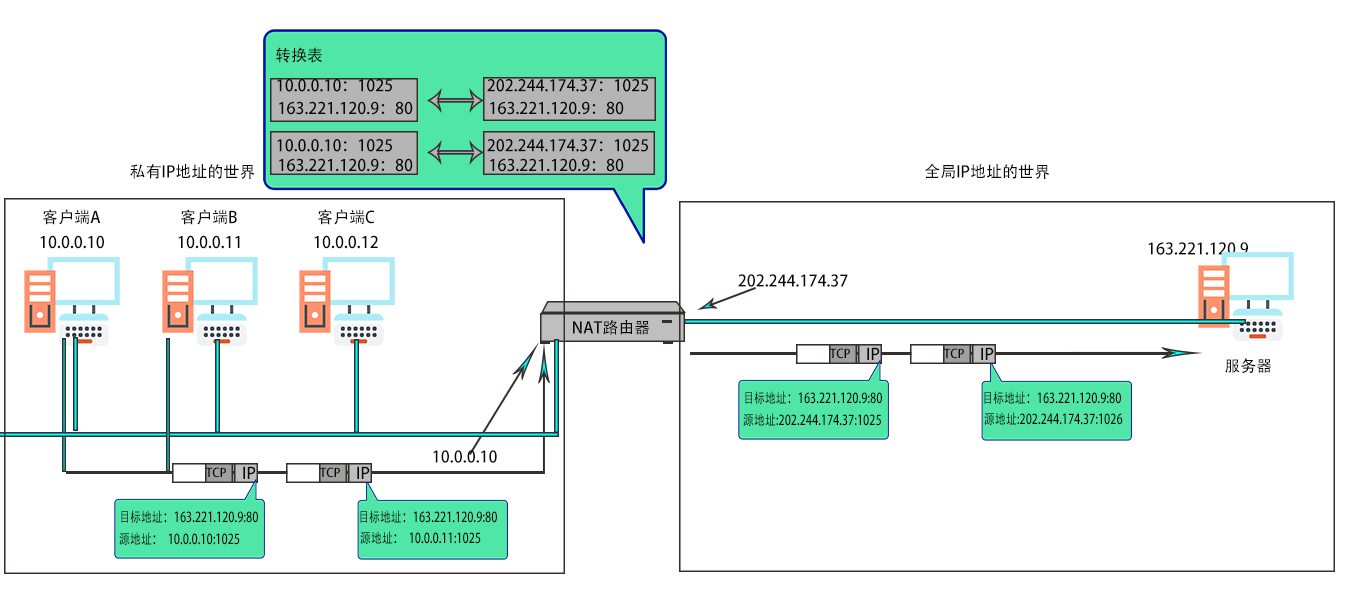
<style>
.page{position:relative;width:1359px;height:593px;background:#ffffff}
.page>*{position:absolute;margin:0}
.t1{font:16px "AdobeHeitiStd-Regular";color:#0a0909}
.t2{font:12px "AdobeHeitiStd-Regular";color:#0a0909}
.t3{font:13.8px "AdobeHeitiStd-Regular";color:#0a0909;scale:0.79 1}
</style>
<div class="page">
<p class="t1" style="left:276px;top:47px;width:47px;height:16px">转换表</p>
<p class="t1" style="left:277px;top:79px;width:115px;height:13px">10.0.0.10：1025</p>
<p class="t1" style="left:487px;top:79px;width:161px;height:13px">202.244.174.37：1025</p>
<p class="t1" style="left:279px;top:101px;width:134px;height:14px">163.221.120.9：80</p>
<p class="t1" style="left:490px;top:101px;width:134px;height:14px">163.221.120.9：80</p>
<p class="t1" style="left:277px;top:139px;width:115px;height:13px">10.0.0.10：1025</p>
<p class="t1" style="left:487px;top:139px;width:161px;height:13px">202.244.174.37：1025</p>
<p class="t1" style="left:279px;top:158px;width:134px;height:14px">163.221.120.9：80</p>
<p class="t1" style="left:490px;top:158px;width:134px;height:14px">163.221.120.9：80</p>
<p class="t1" style="left:130px;top:164px;width:125px;height:15px">私有IP地址的世界</p>
<p class="t1" style="left:925px;top:163px;width:125px;height:16px">全局IP地址的世界</p>
<p class="t1" style="left:43px;top:209px;width:58px;height:16px">客户端A</p>
<p class="t1" style="left:181px;top:209px;width:56px;height:16px">客户端B</p>
<p class="t1" style="left:318px;top:209px;width:57px;height:16px">客户端C</p>
<p class="t1" style="left:40px;top:235px;width:64px;height:14px">10.0.0.10</p>
<p class="t1" style="left:178px;top:235px;width:62px;height:14px">10.0.0.11</p>
<p class="t1" style="left:314px;top:235px;width:64px;height:14px">10.0.0.12</p>
<p class="t1" style="left:1148px;top:242px;width:100px;height:13px">163.221.120.9</p>
<p class="t1" style="left:738px;top:274px;width:110px;height:13px">202.244.174.37</p>
<p class="t1" style="left:573px;top:320px;width:76px;height:15px">NAT路由器</p>
<p class="t2" style="left:829px;top:348px;width:21px;height:11px">TCP</p>
<p class="t1" style="left:867px;top:347px;width:13px;height:13px">IP</p>
<p class="t2" style="left:943px;top:348px;width:21px;height:11px">TCP</p>
<p class="t1" style="left:981px;top:347px;width:13px;height:13px">IP</p>
<p class="t1" style="left:1225px;top:358px;width:46px;height:16px">服务器</p>
<p class="t3" style="left:745px;top:391px;width:137px;height:14px">目标地址：163.221.120.9:80</p>
<p class="t3" style="left:984px;top:391px;width:137px;height:14px">目标地址：163.221.120.9:80</p>
<p class="t3" style="left:743px;top:413px;width:138px;height:13px">源地址:202.244.174.37:1025</p>
<p class="t3" style="left:984px;top:412px;width:139px;height:13px">源地址:202.244.174.37:1026</p>
<p class="t1" style="left:433px;top:450px;width:64px;height:13px">10.0.0.10</p>
<p class="t2" style="left:205px;top:467px;width:21px;height:11px">TCP</p>
<p class="t1" style="left:243px;top:466px;width:13px;height:13px">IP</p>
<p class="t2" style="left:319px;top:467px;width:21px;height:11px">TCP</p>
<p class="t1" style="left:357px;top:466px;width:13px;height:13px">IP</p>
<p class="t3" style="left:121px;top:510px;width:137px;height:14px">目标地址：163.221.120.9:80</p>
<p class="t3" style="left:360px;top:510px;width:137px;height:14px">目标地址：163.221.120.9:80</p>
<p class="t3" style="left:119px;top:532px;width:121px;height:13px">源地址：  10.0.0.10:1025</p>
<p class="t3" style="left:360px;top:531px;width:121px;height:13px">源地址：  10.0.0.11:1025</p>
</div>
